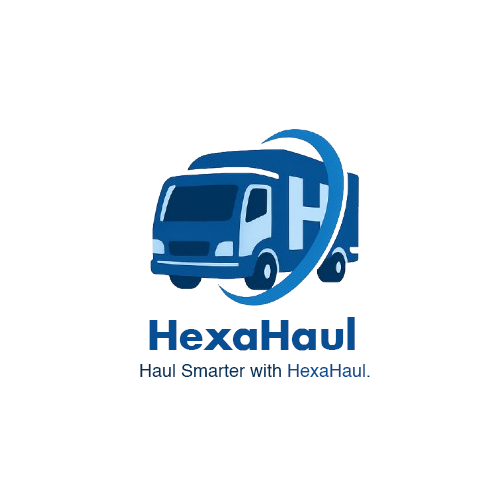
<style>
.page{position:relative;width:500px;height:500px;background:#ffffff}
.page>*{position:absolute;margin:0}
.t1{font:40px "Futura-Bold";color:#084e93}
.t2{font:18px "Helvetica";color:#00335e}
.t3{font:18px "Helvetica";color:#084e93}
</style>
<div class="page">
<p class="t1" style="left:149px;top:317px;width:206px;height:34px">HexaHaul</p>
<p class="t2" style="left:140px;top:364px;width:230px;height:13px">Haul Smarter with <span class="t3">HexaHaul</span>.</p>
</div>
